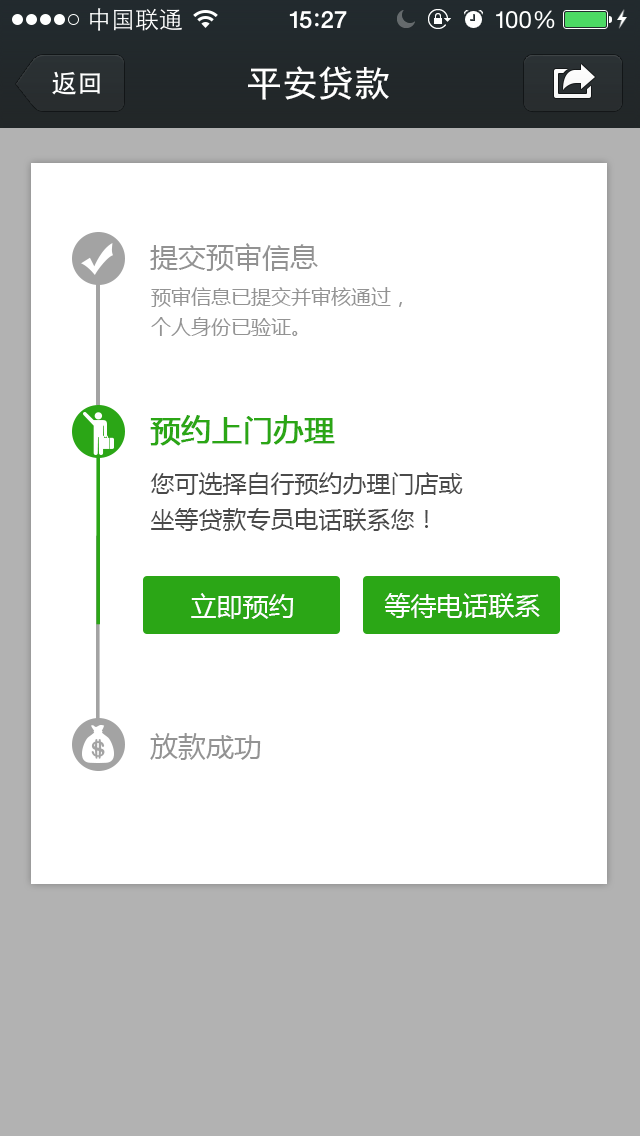
<style>
.page{position:relative;width:640px;height:1136px;background:#ffffff}
.page>*{position:absolute;margin:0}
.t1{font:28px "MicrosoftYaHei";color:#929292}
.t2{font:20px/30px "MicrosoftYaHei";color:#939393}
.t3{font:30px "MicrosoftYaHei";color:#2ba615;font-weight:bold}
.t4{font:24px/36px "MicrosoftYaHei";color:#4a4a4a}
.t5{font:26px "MicrosoftYaHei";color:#ffffff}
.t6{font:28px "MicrosoftYaHei";color:#939393}
</style>
<div class="page">
<p class="t1" style="left:150px;top:243px;width:168px;height:28px">提交预审信息</p>
<p class="t2" style="left:151px;top:287px;width:251px;height:49px">预审信息已提交并审核通过，<br>个人身份已验证。</p>
<p class="t3" style="left:150px;top:415px;width:185px;height:31px">预约上门办理</p>
<p class="t4" style="left:150px;top:472px;width:313px;height:59px">您可选择自行预约办理门店或<br>坐等贷款专员电话联系您！</p>
<p class="t5" style="left:191px;top:593px;width:103px;height:26px">立即预约</p>
<p class="t5" style="left:384px;top:593px;width:156px;height:25px">等待电话联系</p>
<p class="t6" style="left:150px;top:733px;width:111px;height:27px">放款成功</p>
</div>
